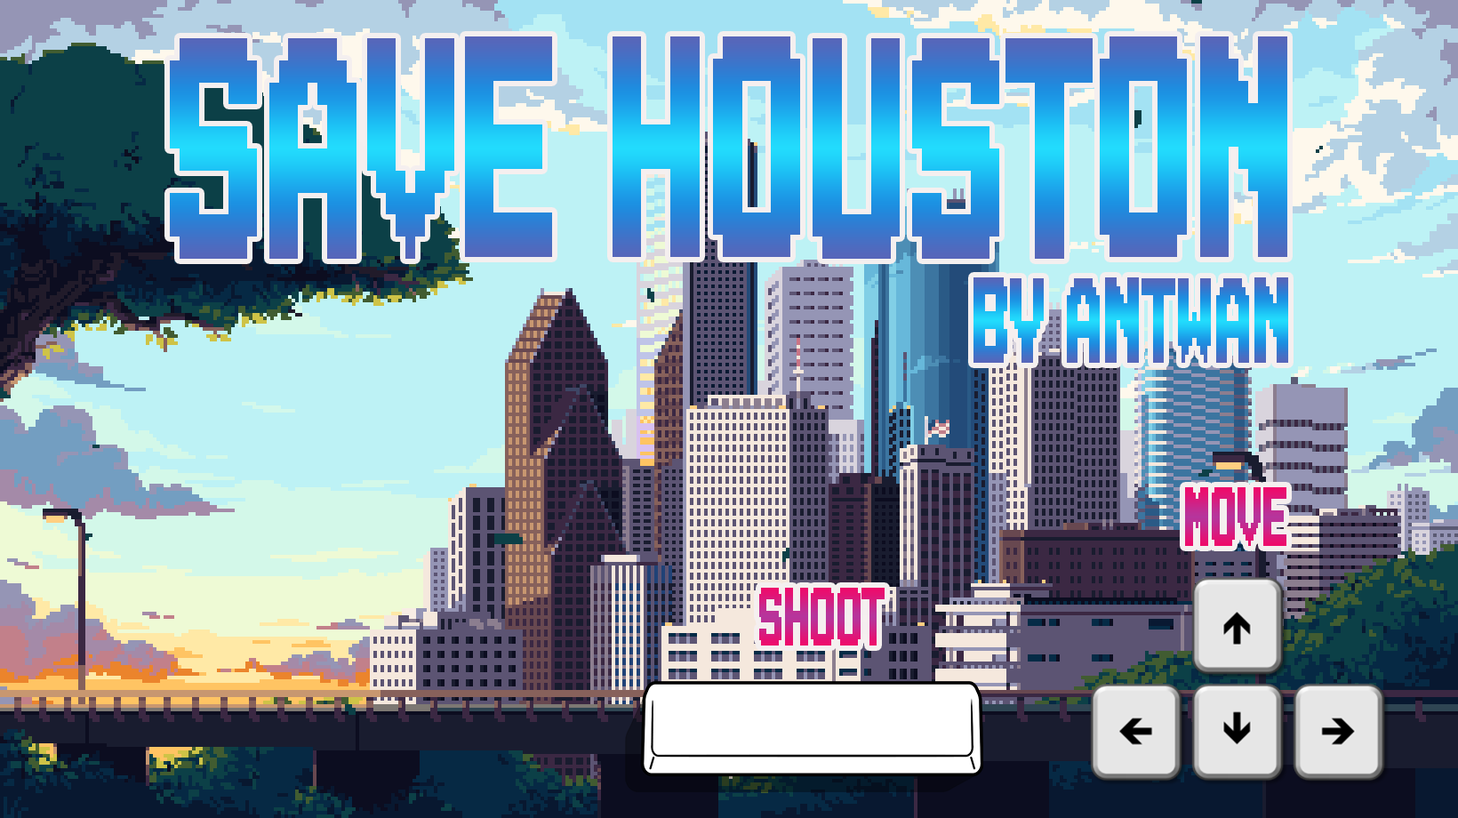
<style>
.page{position:relative;width:1458px;height:818px}
.page>*{position:absolute;margin:0}
.t1{font:313.7px "AutomBold";scale:0.44 1}
.t2{font:120.6px "AutomBold";scale:0.44 1}
.t3{font:83.6px "AutomBold";scale:0.44 1}
.t4{font:82.2px "AutomBold";scale:0.44 1}
</style>
<div class="page">
<p class="t1" style="left:170px;top:36px;width:1117px;height:223px">Save Houston</p>
<p class="t2" style="left:973px;top:277px;width:315px;height:86px">By Antwan</p>
<p class="t3" style="left:1185px;top:487px;width:101px;height:59px">Move</p>
<p class="t4" style="left:759px;top:588px;width:126px;height:57px">Shoot</p>
</div>
